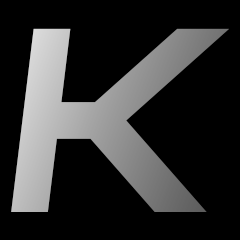
<style>
.page{position:relative;width:240px;height:240px;background:#000000}
.page>*{position:absolute;margin:0}
.t1{font:250px "RobotRoc"}
</style>
<div class="page">
<p class="t1" style="left:11px;top:28px;width:218px;height:184px">K</p>
</div>
